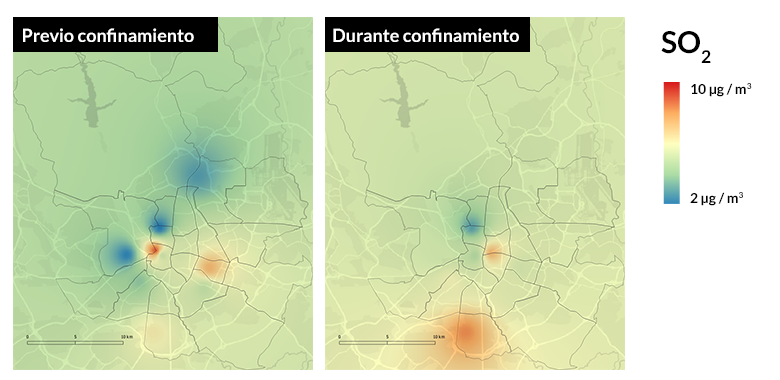
<style>
.page{position:relative;width:780px;height:380px;background:#ffffff}
.page>*{position:absolute;margin:0}
.t1{font:18px "Lato-Bold";color:#ffffff}
.t2{font:30px "Lato-Bold";color:#000000}
.t3{font:14px "Lato-Bold";color:#000000}
</style>
<div class="page">
<p class="t1" style="left:23px;top:28px;width:171px;height:14px">Previo confinamiento</p>
<p class="t1" style="left:333px;top:28px;width:186px;height:14px">Durante confinamiento</p>
<p class="t2" style="left:661px;top:31px;width:50px;height:32px">SO2</p>
<p class="t3" style="left:691px;top:83px;width:61px;height:14px">10 μg / m3</p>
<p class="t3" style="left:690px;top:192px;width:53px;height:14px">2 μg / m3</p>
</div>
